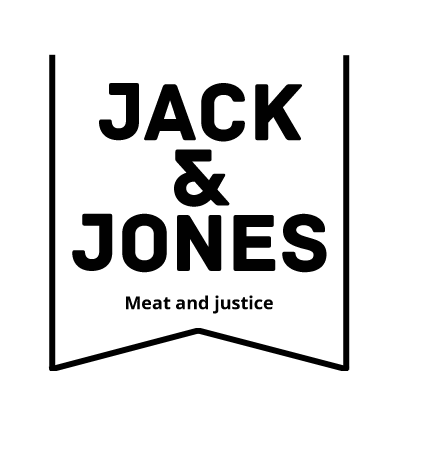
<style>
.page{position:relative;width:427px;height:462px;background:#ffffff}
.page>*{position:absolute;margin:0}
.t1{font:85.2px/65.4px "Archive";color:#010101}
.t2{font:18px "OpenSans-Bold";color:#010101}
</style>
<div class="page">
<p class="t1" style="left:72px;top:83px;width:255px;height:190px;text-align:center">Jack<br>&amp;<br>Jones</p>
<p class="t2" style="left:126px;top:295px;width:147px;height:19px">Meat and justice</p>
</div>
